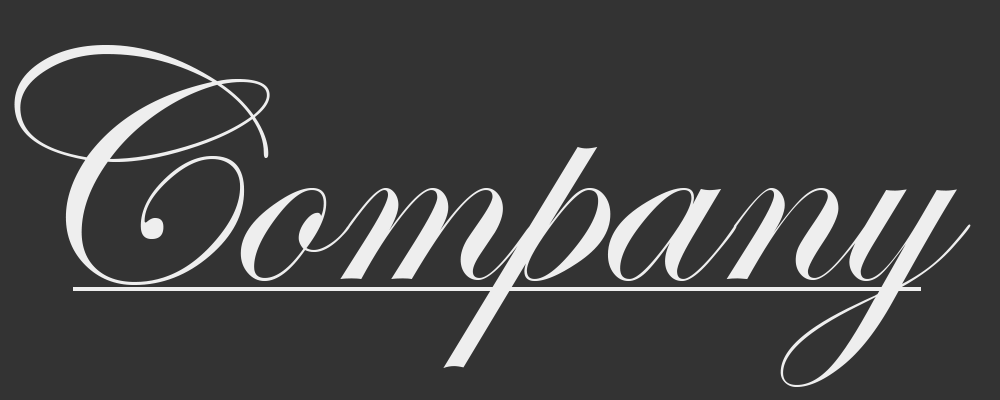
<style>
.page{position:relative;width:1000px;height:400px;background:#333333}
.page>*{position:absolute;margin:0}
.t1{font:335px "EdwardianScriptITC";color:#eeeeee}
</style>
<div class="page">
<p class="t1" style="left:14px;top:44px;width:957px;height:343px">Company</p>
</div>
